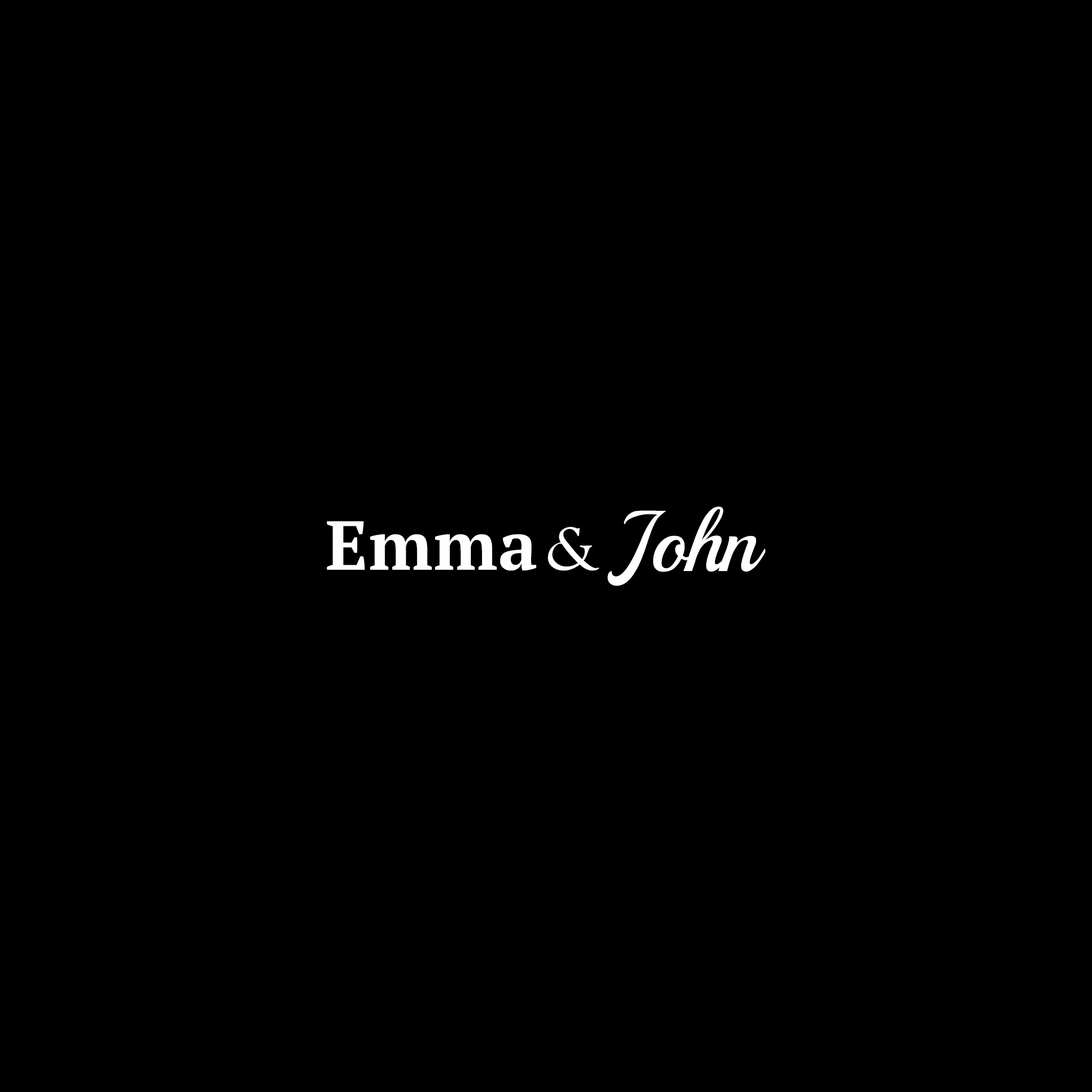
<style>
.page{position:relative;width:1092px;height:1092px;background:#000000}
.page>*{position:absolute;margin:0}
.t1{font:86.2px "Playball-Regular";letter-spacing:-0.02em;color:#ffffff}
.t2{font:69px "PTSerif-Bold";letter-spacing:-0.02em;color:#ffffff;font-weight:bold}
.t3{font:63.5px "Goudy-Old-Style-Normal";letter-spacing:-0.02em;color:#ffffff;font-style:italic}
</style>
<div class="page">
<p class="t1" style="left:607px;top:507px;width:159px;height:79px">John</p>
<p class="t2" style="left:327px;top:521px;width:209px;height:50px">Emma</p>
<p class="t3" style="left:548px;top:527px;width:51px;height:44px">&amp;</p>
</div>
